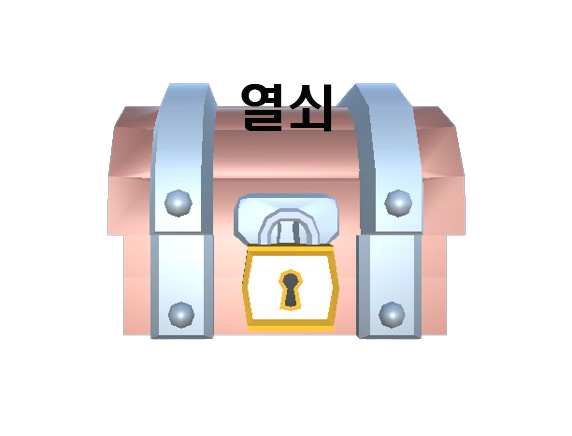
<style>
.page{position:relative;width:572px;height:436px;background:#ffffff}
.page>*{position:absolute;margin:0}
.t1{font:50px "H2hdrM";letter-spacing:0.001em;color:#050505}
</style>
<div class="page">
<p class="t1" style="left:241px;top:84px;width:91px;height:48px">열쇠</p>
</div>
